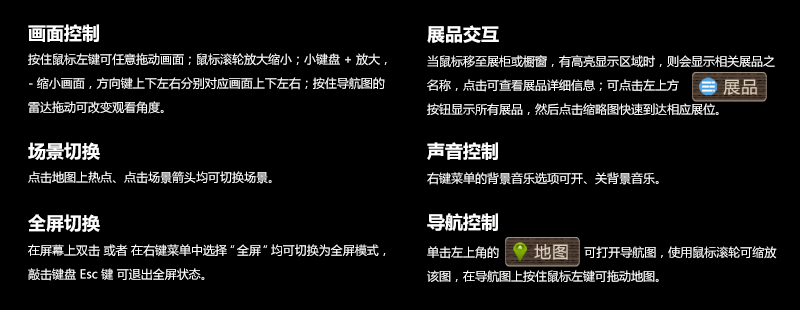
<style>
.page{position:relative;width:800px;height:310px;background:#000000}
.page>*{position:absolute;margin:0}
.t1{font:18px "MicrosoftYaHei-Bold";color:#ffffff}
.t2{font:12px/24px "MicrosoftYaHei";color:#ffffff}
.t3{font:12px "MicrosoftYaHei";color:#ffffff}
</style>
<div class="page">
<p class="t1" style="left:28px;top:24px;width:71px;height:18px">画面控制</p>
<p class="t1" style="left:427px;top:25px;width:72px;height:18px">展品交互</p>
<p class="t2" style="left:28px;top:53px;width:359px;height:61px">按住鼠标左键可任意拖动画面；鼠标滚轮放大缩小；小键盘 + 放大， - 缩小画面，方向键上下左右分别对应画面上下左右；按住导航图的雷达拖动可改变观看角度。</p>
<p class="t2" style="left:427px;top:55px;width:348px;height:61px">当鼠标移至展柜或橱窗，有高亮显示区域时，则会显示相关展品之名称，点击可查看展品详细信息；可点击左上方                         按钮显示所有展品，然后点击缩略图快速到达相应展位。</p>
<p class="t1" style="left:28px;top:142px;width:72px;height:18px">场景切换</p>
<p class="t1" style="left:427px;top:142px;width:71px;height:18px">声音控制</p>
<p class="t3" style="left:28px;top:171px;width:244px;height:13px">点击地图上热点、点击场景箭头均可切换场景。</p>
<p class="t3" style="left:427px;top:172px;width:232px;height:13px">右键菜单的背景音乐选项可开、关背景音乐。</p>
<p class="t1" style="left:28px;top:214px;width:72px;height:18px">全屏切换</p>
<p class="t1" style="left:427px;top:213px;width:71px;height:18px">导航控制</p>
<p class="t2" style="left:28px;top:244px;width:358px;height:37px">在屏幕上双击 或者 在右键菜单中选择“全屏”均可切换为全屏模式，敲击键盘 Esc 键 可退出全屏状态。</p>
<p class="t2" style="left:427px;top:246px;width:350px;height:37px">单击左上角的                        可打开导航图，使用鼠标滚轮可缩放该图，在导航图上按住鼠标左键可拖动地图。</p>
</div>
